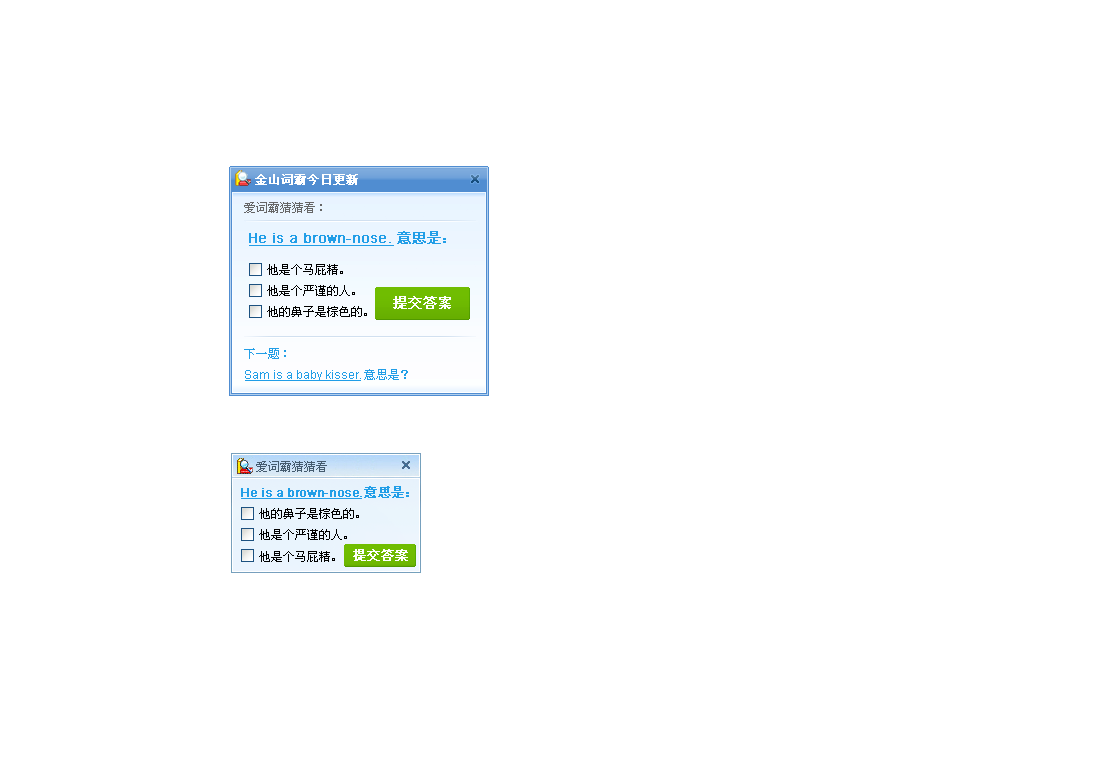
<style>
.page{position:relative;width:1102px;height:778px;background:#ffffff}
.page>*{position:absolute;margin:0}
.t1{font:12px "SimSun";color:#ffffff;font-weight:bold}
.t2{font:12px "SimSun";color:#666666}
.t3{font:12px/21px "SimSun";color:#000000}
.t4{font:14px/26px "ArialMT";color:#219ee7;font-weight:bold}
.t5{font:14px/55px "ArialMT";color:#219ee7;font-weight:bold}
.t6{font:14px/55px "SimSun";color:#219ee7;font-weight:bold}
.t7{font:14px "SimSun";letter-spacing:0.01em;color:#ffffff;font-weight:bold}
.t8{font:12px/21px "ArialMT";color:#219ee7}
.t9{font:12px/21px "SimSun";color:#219ee7}
.t10{font:12px "SimSun";color:#455b6e}
.t11{font:12px/26px "ArialMT";letter-spacing:-0.03em;color:#219ee7;font-weight:bold}
.t12{font:12px/55px "ArialMT";letter-spacing:-0.03em;color:#219ee7;font-weight:bold}
.t13{font:13px/43px "SimSun";letter-spacing:-0.04em;color:#219ee7;font-weight:bold}
.t14{font:12px/17px "SimSun";color:#000000}
.t15{font:12px/22px "SimSun";color:#000000}
.t16{font:13px "SimSun";letter-spacing:0.01em;color:#ffffff;font-weight:bold}
</style>
<div class="page">
<p class="t1" style="left:255px;top:174px;width:103px;height:11px">金山词霸今日更新</p>
<p class="t2" style="left:244px;top:202px;width:78px;height:11px">爱词霸猜猜看：</p>
<p class="t3" style="left:249px;top:231px;width:197px;height:86px"><span class="t4">He is a brown-nose</span><span class="t5">. </span><span class="t6">意思是：<br>    </span>他是个马屁精。<br>    他是个严谨的人。<br>    他的鼻子是棕色的。</p>
<p class="t7" style="left:393px;top:296px;width:58px;height:13px">提交答案</p>
<p class="t8" style="left:244px;top:348px;width:164px;height:33px"><span class="t9">下一题：<br></span>Sam is a baby kisser.<span class="t9">意思是？</span></p>
<p class="t10" style="left:256px;top:461px;width:71px;height:11px">爱词霸猜猜看</p>
<p class="t11" style="left:241px;top:486px;width:168px;height:76px">He is a brown-nose<span class="t12">.</span><span class="t13">意思是：  <br>    </span><span class="t3">他的鼻子是棕色的。<br>    </span><span class="t14">他是个严谨的人。<br>    </span><span class="t3">他是个马屁精</span><span class="t15">。</span></p>
<p class="t16" style="left:353px;top:549px;width:55px;height:12px">提交答案</p>
</div>
